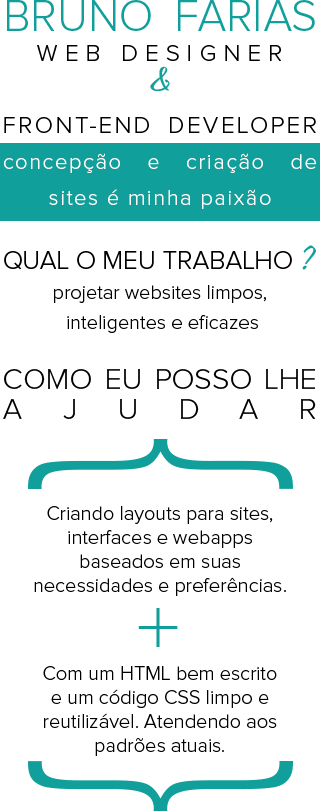
<style>
.page{position:relative;width:320px;height:811px;background:#ffffff}
.page>*{position:absolute;margin:0}
.t1{font:20px/30px "ProximaNova-Light";color:#000000}
.t2{font:45px/36px "ProximaNova-Light";color:#109f9a}
.t3{font:24px/30px "ProximaNova-Light";letter-spacing:0.3em;color:#000000}
.t4{font:33px/30px "Fangtasia";color:#109f9a}
.t5{font:24px/30px "ProximaNova-Light";letter-spacing:0.1em;color:#000000}
.t6{font:22px/36px "ProximaNova-Light";letter-spacing:0.07em;color:#ffffff}
.t7{font:26px/64px "ProximaNova-Light";color:#000000}
.t8{font:26px/64px "Fangtasia";color:#109f9a}
.t9{font:30px/30px "ProximaNova-Light";color:#000000}
.t10{font:20px/24px "ProximaNova-Light";color:#000000}
.t11{font:48px "Fangtasia";color:#109f9a}
</style>
<div class="page">
<p class="t1" style="left:3px;top:0px;width:314px;height:419px;text-align:justify"><span class="t2">BRUNO FARIAS<br></span><span class="t3">WEB DESIGNER<br> </span><span class="t4">&amp; <br></span><span class="t5">FRONT-END DEVELOPER </span><span class="t6">concepção e criação de sites é minha paixão<br></span><span class="t7">QUAL O MEU TRABALHO </span><span class="t8">? </span>projetar websites limpos,<br> inteligentes e eficazes<br><span class="t9"><br>COMO EU POSSO LHE AJUDAR</span></p>
<p class="t10" style="left:34px;top:506px;width:252px;height:90px;text-align:center">Criando layouts para sites, interfaces e webapps baseados em suas necessidades e preferências.</p>
<p class="t11" style="left:138px;top:608px;width:40px;height:39px">+</p>
<p class="t10" style="left:43px;top:666px;width:234px;height:90px;text-align:center">Com um HTML bem escrito <br>e um código CSS limpo e reutilizável. Atendendo aos padrões atuais.</p>
</div>
